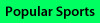
<style>
.page{position:relative;width:100px;height:23px;background:#00ff60}
.page>*{position:absolute;margin:0}
.t1{font:14px "MyriadPro-Semibold";color:#000000}
</style>
<div class="page">
<p class="t1" style="left:6px;top:6px;width:89px;height:13px">Popular Sports</p>
</div>
